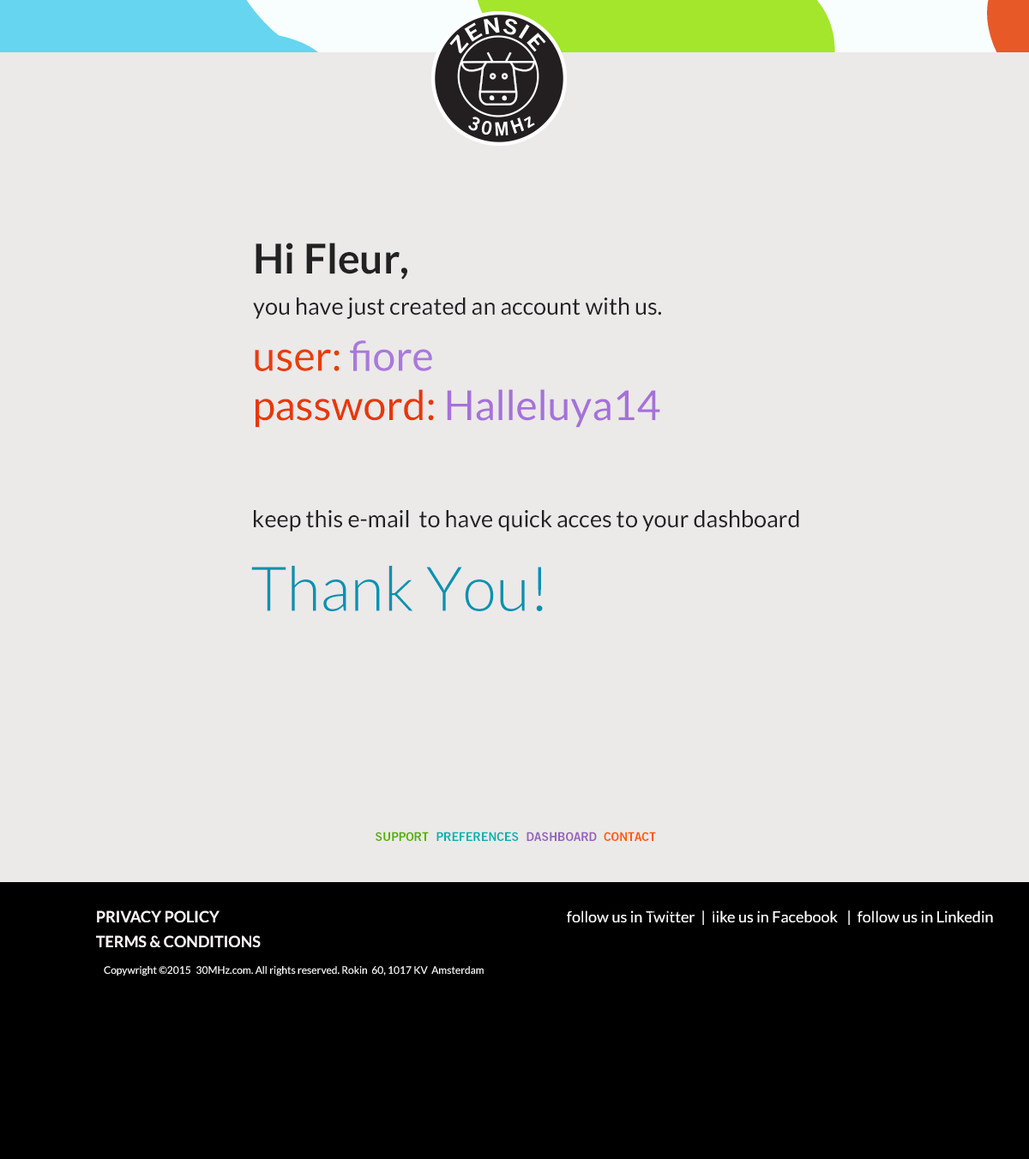
<style>
.page{position:relative;width:1029px;height:1159px;background:#ece9e9}
.page>*{position:absolute;margin:0}
.t1{font:23.1px/20.6px "Lato-Regular";color:#222222}
.t2{font:41.1px/20.6px "Lato-Bold";color:#222222}
.t3{font:41.1px "Lato-Regular";color:#a571da}
.t4{font:41.1px "Lato-Regular";color:#e73e03}
.t5{font:41.1px "Lato-Regular";color:#a979dc}
.t6{font:41.1px "Lato-Regular";color:#e73803}
.t7{font:23.1px "Lato-Regular";color:#222222}
.t8{font:61.7px "Lato-Light";color:#0093b2}
.t9{font:12px "TradeGothicLTStd-Bd2";color:#54b101}
.t10{font:12px "TradeGothicLTStd-Bd2";color:#00b3b1}
.t11{font:12px "TradeGothicLTStd-Bd2";color:#9464b9}
.t12{font:12px "TradeGothicLTStd-Bd2";color:#ff5a00}
.t13{font:15.4px "Lato-Bold";color:#fcf7f7}
.t14{font:15.4px "Lato-Regular";color:#fefefd}
.t15{font:10.3px "Lato-Regular";color:#fdfdfd}
</style>
<div class="page">
<p class="t1" style="left:253px;top:243px;width:408px;height:76px"><span class="t2">Hi Fleur,<br><br></span>you have just created an account with us.</p>
<p class="t3" style="left:255px;top:340px;width:405px;height:88px"><span class="t4">user: </span><span class="t5">fiore<br></span><span class="t6">password: </span>Halleluya14</p>
<p class="t7" style="left:254px;top:510px;width:545px;height:22px">keep this e-mail  to have quick acces to your dashboard</p>
<p class="t8" style="left:251px;top:566px;width:292px;height:45px">Thank You!</p>
<p class="t9" style="left:376px;top:832px;width:53px;height:9px">SUPPORT</p>
<p class="t10" style="left:436px;top:832px;width:83px;height:9px">PREFERENCES</p>
<p class="t11" style="left:526px;top:832px;width:71px;height:9px">DASHBOARD</p>
<p class="t12" style="left:604px;top:832px;width:52px;height:9px">CONTACT</p>
<p class="t13" style="left:97px;top:910px;width:122px;height:12px">PRIVACY POLICY</p>
<p class="t14" style="left:567px;top:910px;width:426px;height:15px">follow us in Twitter  |  like us in Facebook   |  follow us in Linkedin</p>
<p class="t13" style="left:96px;top:935px;width:165px;height:12px">TERMS &amp; CONDITIONS</p>
<p class="t15" style="left:104px;top:966px;width:86px;height:10px">Copywright ©2015</p>
<p class="t15" style="left:196px;top:966px;width:288px;height:10px">30MHz.com. All rights reserved. Rokin  60, 1017 KV  Amsterdam</p>
</div>
